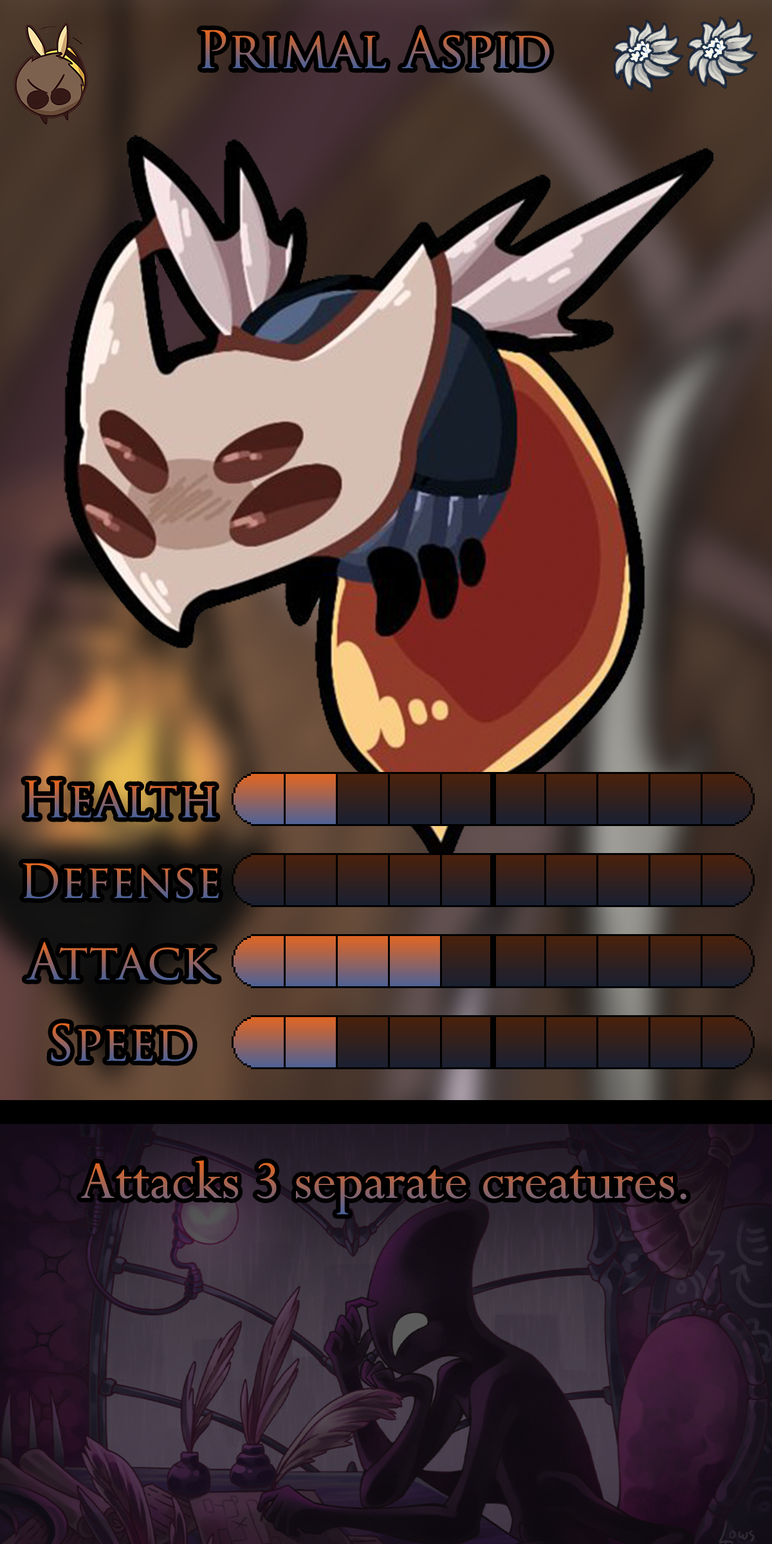
<style>
.page{position:relative;width:772px;height:1544px}
.page>*{position:absolute;margin:0}
.t1{font:86.2px "TrajanPro-Regular"}
.t2{font:83.6px "TrajanPro-Regular"}
.t3{font:78.5px "TrajanPro-Regular"}
.t4{font:101.7px "Perpetua"}
</style>
<div class="page">
<p class="t1" style="left:201px;top:29px;width:349px;height:40px">Primal Aspid</p>
<p class="t2" style="left:25px;top:781px;width:191px;height:37px">Health</p>
<p class="t3" style="left:23px;top:864px;width:196px;height:35px">Defense</p>
<p class="t2" style="left:26px;top:942px;width:191px;height:39px">Attack</p>
<p class="t2" style="left:51px;top:1023px;width:142px;height:39px">Speed</p>
<p class="t4" style="left:81px;top:1160px;width:606px;height:55px">Attacks 3 separate creatures.</p>
</div>
